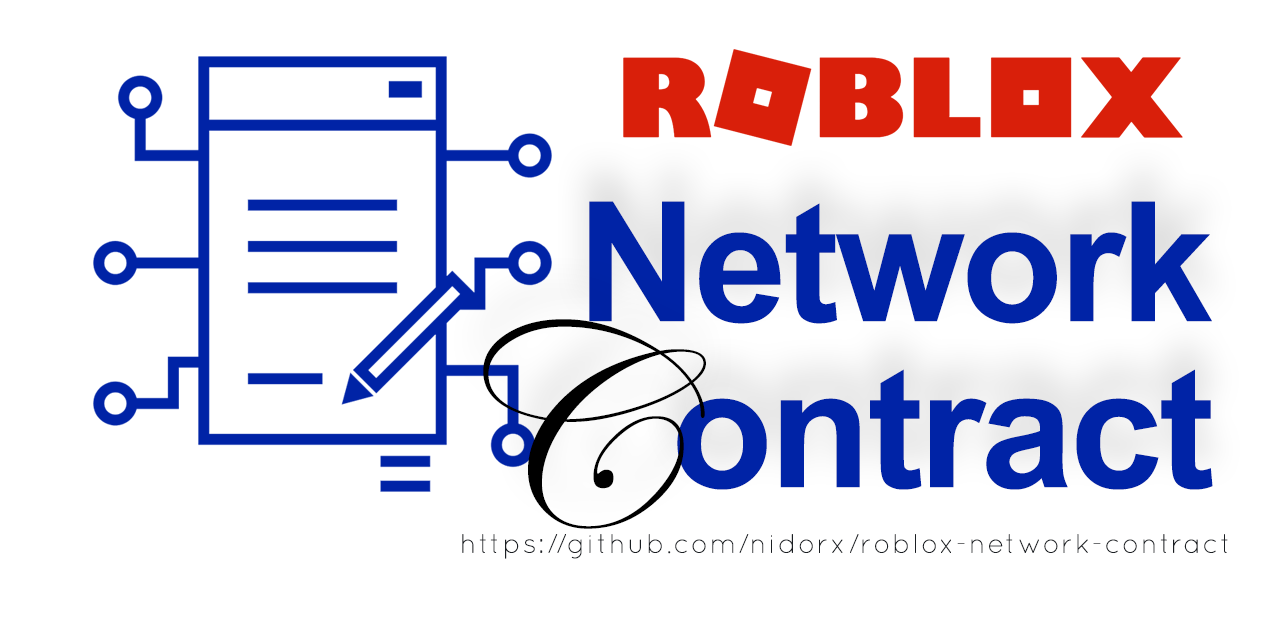
<style>
.page{position:relative;width:1280px;height:640px;background:#ffffff}
.page>*{position:absolute;margin:0}
.t1{font:286px/880.7px "Arial-BoldMT";letter-spacing:-0.05em;color:#0023a6;font-weight:bold}
.t2{font:286px/166.2px "Arial-BoldMT";letter-spacing:-0.05em;color:#0023a6;font-weight:bold}
.t3{font:500px "EdwardianScriptITC";letter-spacing:0.05em;color:#000000;font-weight:bold}
.t4{font:46.2px "Quicksand-Light";letter-spacing:0.05em;color:#1b1f23;font-weight:bold}
</style>
<div class="page">
<p class="t1" style="left:589px;top:201px;width:624px;height:289px;text-align:center">Network <br>   <span class="t2">ontract</span></p>
<p class="t3" style="left:483px;top:319px;width:223px;height:210px">C</p>
<p class="t4" style="left:462px;top:534px;width:766px;height:25px">https://github.com/nidorx/roblox-network-contract</p>
</div>
